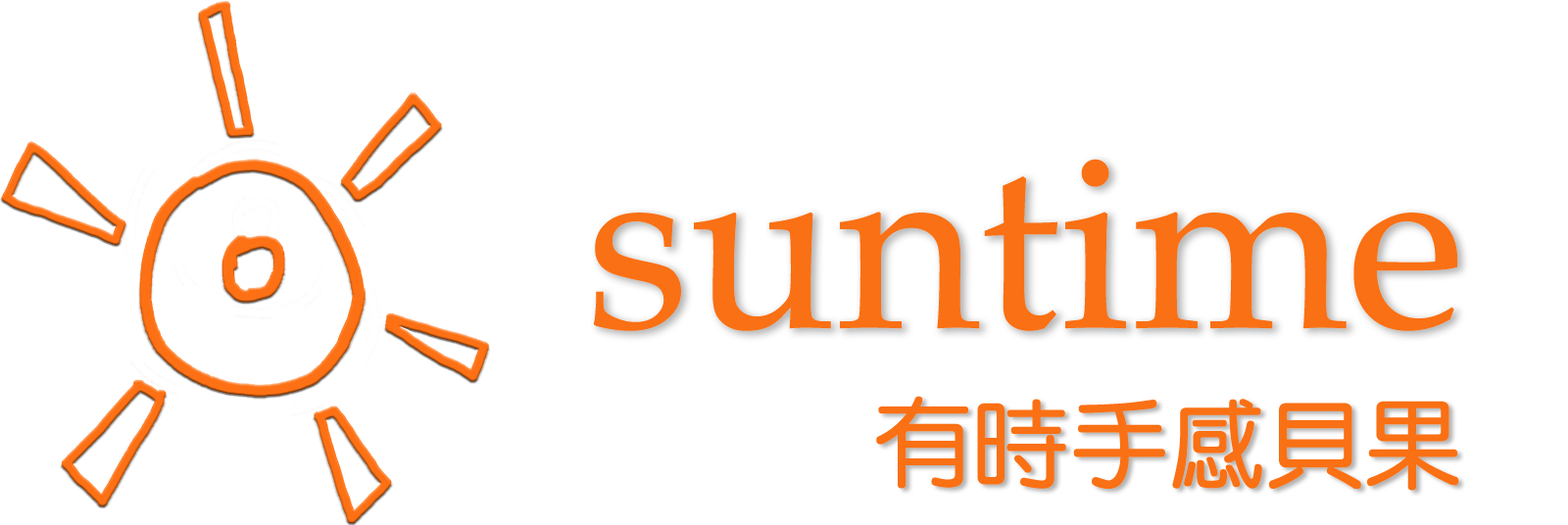
<style>
.page{position:relative;width:1568px;height:525px;background:#ffffff}
.page>*{position:absolute;margin:0}
.t1{font:245px "BookAntiqua";color:#fa7014}
.t2{font:98px "DFYuan-W7-WIN-BF";color:#fa7014}
</style>
<div class="page">
<p class="t1" style="left:594px;top:159px;width:864px;height:172px">suntime</p>
<p class="t2" style="left:876px;top:396px;width:583px;height:95px">有時手感貝果</p>
</div>
